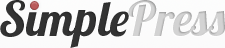
<style>
.page{position:relative;width:225px;height:48px}
.page>*{position:absolute;margin:0}
.t1{font:48px "Lobster1.4";color:#333333}
.t2{font:48px "Lobster1.4";color:#d3d3d3}
</style>
<div class="page">
<p class="t1" style="left:0px;top:0px;width:225px;height:48px">Simple<span class="t2">Press</span></p>
</div>
